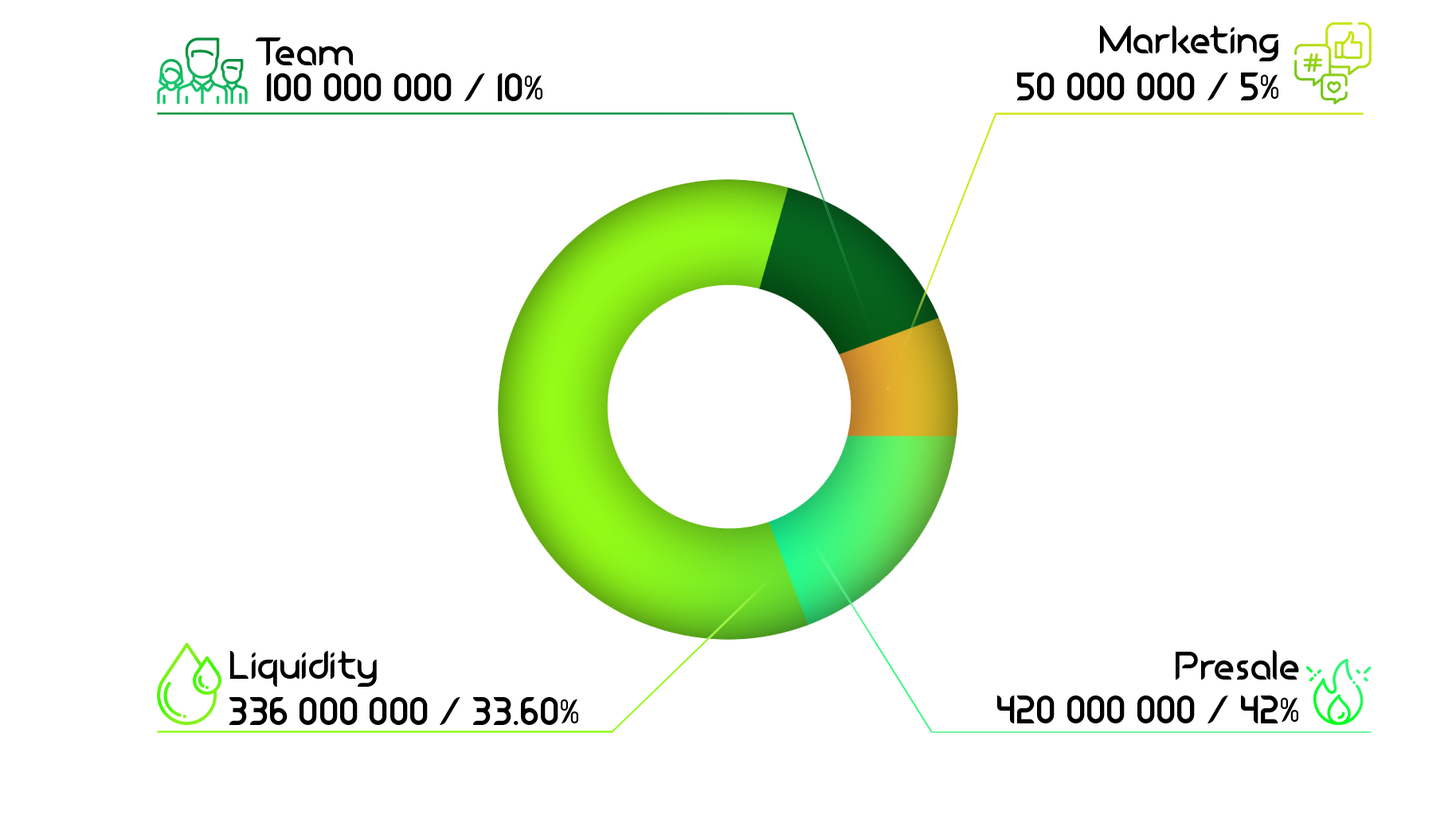
<style>
.page{position:relative;width:1456px;height:819px;background:#ffffff}
.page>*{position:absolute;margin:0}
.t1{font:39.3px "Cano";letter-spacing:0.005em;color:#000000}
</style>
<div class="page">
<p class="t1" style="left:1100px;top:25px;width:179px;height:36px">Marketing</p>
<p class="t1" style="left:256px;top:37px;width:97px;height:28px">Team</p>
<p class="t1" style="left:267px;top:73px;width:275px;height:28px">100 000 000 / 10%</p>
<p class="t1" style="left:1017px;top:72px;width:262px;height:28px">50 000 000 / 5%</p>
<p class="t1" style="left:230px;top:651px;width:147px;height:36px">Liquidity</p>
<p class="t1" style="left:1176px;top:650px;width:123px;height:29px">Presale</p>
<p class="t1" style="left:229px;top:697px;width:349px;height:28px">336 000 000 / 33.60%</p>
<p class="t1" style="left:997px;top:695px;width:301px;height:28px">420 000 000 / 42%</p>
</div>
